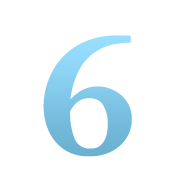
<style>
.page{position:relative;width:192px;height:192px;background:#ffffff}
.page>*{position:absolute;margin:0}
.t1{font:164.4px "PerpetuaTitlingMT-Bold";color:#7ec5e5}
</style>
<div class="page">
<p class="t1" style="left:43px;top:35px;width:89px;height:122px">6</p>
</div>
